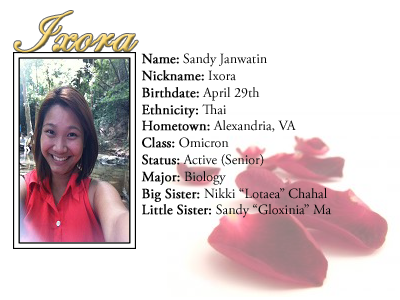
<style>
.page{position:relative;width:400px;height:300px;background:#ffffff}
.page>*{position:absolute;margin:0}
.t1{font:60px "EdwardianScriptITC";font-weight:bold}
.t2{font:14px "AGaramondPro-Regular";color:#000000}
.t3{font:14px "AGaramondPro-Regular";color:#000000;font-weight:bold}
</style>
<div class="page">
<p class="t1" style="left:14px;top:11px;width:124px;height:42px">Ixora</p>
<p class="t2" style="left:141px;top:53px;width:191px;height:165px"><span class="t3">Name:</span> Sandy Janwatin<br><span class="t3">Nickname:</span> Ixora<br><span class="t3">Birthdate:</span> April 29th<br><span class="t3">Ethnicity:</span> Thai<br><span class="t3">Hometown:</span> Alexandria, VA<br><span class="t3">Class:</span> Omicron<br><span class="t3">Status:</span> Active (Senior)<br><span class="t3">Major:</span> Biology<br><span class="t3">Big Sister: </span>Nikki “Lotaea” Chahal<br><span class="t3">Little Sister: </span>Sandy “Gloxinia” Ma</p>
</div>
